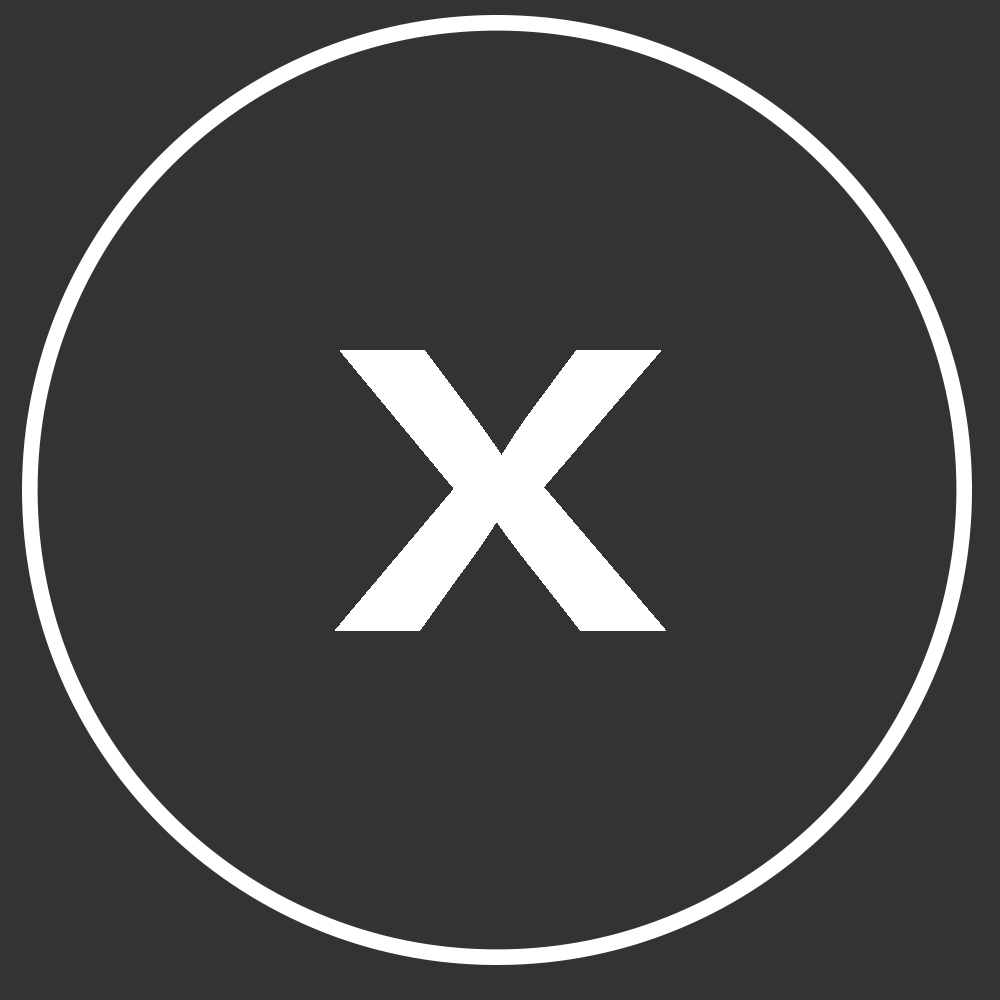
<style>
.page{position:relative;width:1000px;height:1000px;background:#333333}
.page>*{position:absolute;margin:0}
.t1{font:415.8px "MyriadPro-Semibold";color:#ffffff;font-variant:small-caps;scale:1.43 1}
</style>
<div class="page">
<p class="t1" style="left:335px;top:350px;width:331px;height:281px">X</p>
</div>
